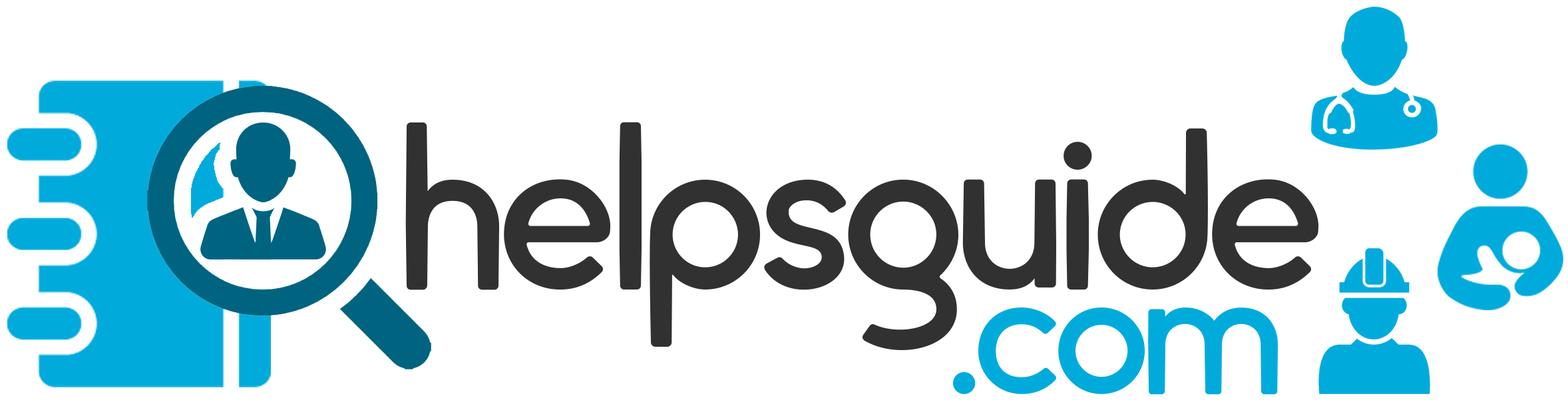
<style>
.page{position:relative;width:1568px;height:404px;background:#ffffff}
.page>*{position:absolute;margin:0}
.t1{font:222.7px "cream-DEMO";letter-spacing:-0.08em;color:#313131}
.t2{font:175.3px "cream-DEMO";letter-spacing:-0.08em;color:#00abdc}
</style>
<div class="page">
<p class="t1" style="left:405px;top:122px;width:913px;height:228px">helpsguide</p>
<p class="t2" style="left:953px;top:307px;width:325px;height:88px">.com</p>
</div>
